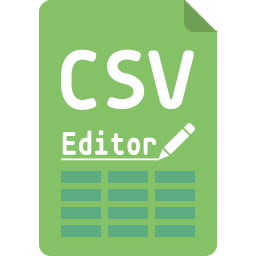
<style>
.page{position:relative;width:256px;height:256px;background:#85c166}
.page>*{position:absolute;margin:0}
.t1{font:78.9px "mononoki-Bold";color:#ffffff;font-weight:bold}
.t2{font:30.7px "mononoki-Bold";color:#ffffff;font-weight:bold;text-decoration:underline;scale:0.9 1}
</style>
<div class="page">
<p class="t1" style="left:61px;top:49px;width:133px;height:61px">CSV</p>
<p class="t2" style="left:61px;top:130px;width:98px;height:31px">Editor</p>
</div>
